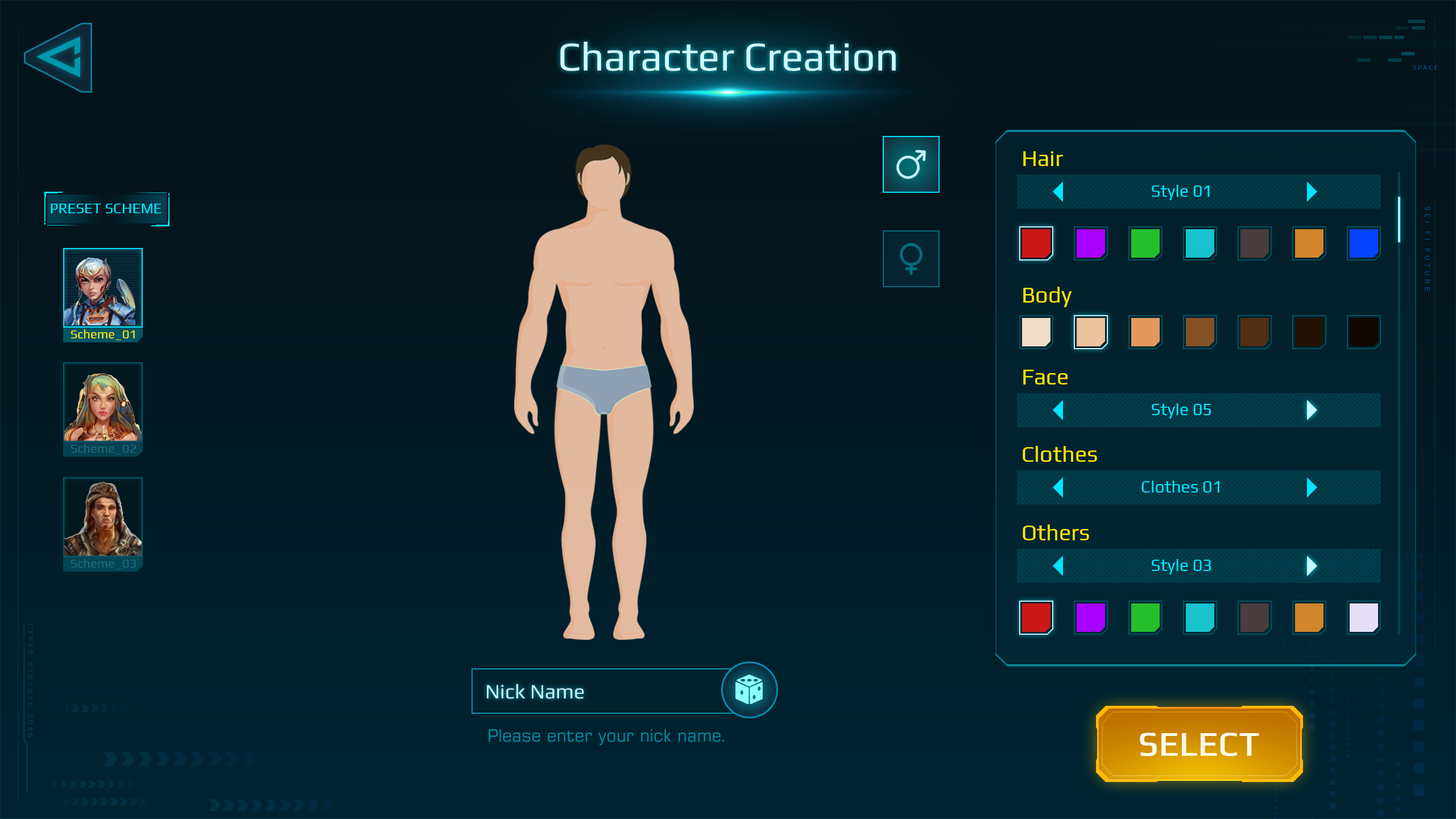
<style>
.page{position:relative;width:1456px;height:819px}
.page>*{position:absolute;margin:0}
.t1{font:40.9px "Play-Regular";color:#d1faff}
.t2{font:22.7px "Play-Regular";color:#ffe400}
.t3{font:17.1px "Play-Regular";color:#00e4ff}
.t4{font:14.8px "Play-Regular";color:#00e4ff;text-transform:uppercase}
.t5{font:12.5px "Play-Regular";color:#ffe400}
.t6{font:12.5px "Play-Regular";color:#21687a}
.t7{font:20.5px "Play-Regular";color:#c5f2ff}
.t8{font:17.1px "Square721BT-Roman";color:#048aa2}
.t9{font:34.1px "Play-Regular";color:#fffbe7;text-transform:uppercase;font-weight:bold}
</style>
<div class="page">
<p class="t1" style="left:560px;top:42px;width:336px;height:29px">Character Creation</p>
<p class="t2" style="left:1023px;top:151px;width:40px;height:15px">Hair</p>
<p class="t3" style="left:1152px;top:185px;width:58px;height:15px">Style 01</p>
<p class="t4" style="left:51px;top:204px;width:111px;height:9px">preset scheme</p>
<p class="t2" style="left:1023px;top:287px;width:49px;height:20px">Body</p>
<p class="t5" style="left:71px;top:329px;width:64px;height:11px">Scheme_01</p>
<p class="t2" style="left:1023px;top:370px;width:45px;height:14px">Face</p>
<p class="t3" style="left:1152px;top:403px;width:59px;height:16px">Style 05</p>
<p class="t6" style="left:71px;top:444px;width:65px;height:10px">Scheme_02</p>
<p class="t2" style="left:1023px;top:446px;width:74px;height:16px">Clothes</p>
<p class="t3" style="left:1141px;top:481px;width:78px;height:12px">Clothes 01</p>
<p class="t2" style="left:1023px;top:524px;width:66px;height:16px">Others</p>
<p class="t6" style="left:71px;top:559px;width:65px;height:10px">Scheme_03</p>
<p class="t3" style="left:1152px;top:559px;width:59px;height:15px">Style 03</p>
<p class="t7" style="left:487px;top:684px;width:97px;height:15px">Nick Name</p>
<p class="t8" style="left:489px;top:729px;width:235px;height:16px">Please enter your nick name.</p>
<p class="t9" style="left:1140px;top:733px;width:119px;height:23px">SELECT</p>
</div>
